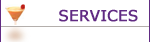
<style>
.page{position:relative;width:150px;height:42px;background:#ffffff}
.page>*{position:absolute;margin:0}
.t1{font:15px "Verdana";color:#612b83;font-weight:bold}
</style>
<div class="page">
<p class="t1" style="left:59px;top:9px;width:79px;height:13px">SERVICES</p>
</div>
